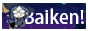
<style>
.page{position:relative;width:88px;height:31px;background:#ffffff}
.page>*{position:absolute;margin:0}
.t1{font:18.3px "AdobeHeitiStd-Regular";color:#ffffff}
</style>
<div class="page">
<p class="t1" style="left:25px;top:8px;width:59px;height:16px">Baiken!</p>
</div>
